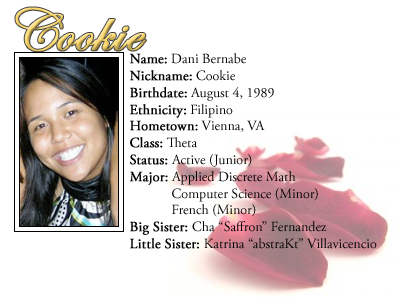
<style>
.page{position:relative;width:400px;height:300px;background:#ffffff}
.page>*{position:absolute;margin:0}
.t1{font:60px "EdwardianScriptITC";font-weight:bold}
.t2{font:14px "AGaramondPro-Regular";color:#000000}
.t3{font:14px "AGaramondPro-Regular";color:#000000;font-weight:bold}
</style>
<div class="page">
<p class="t1" style="left:15px;top:7px;width:131px;height:45px">Cookie</p>
<p class="t2" style="left:129px;top:53px;width:248px;height:196px"><span class="t3">Name:</span> Dani Bernabe<br><span class="t3">Nickname:</span> Cookie<br><span class="t3">Birthdate:</span> August 4, 1989<br><span class="t3">Ethnicity:</span> Filipino<br><span class="t3">Hometown:</span> Vienna, VA<br><span class="t3">Class:</span> Theta<br><span class="t3">Status: </span>Active (Junior)<br><span class="t3">Major:</span> Applied Discrete Math<br>            Computer Science (Minor)<br>            French (Minor)<br><span class="t3">Big Sister: </span>Cha “Saffron” Fernandez<br><span class="t3">Little Sister: </span>Katrina “abstraKt” Villavicencio</p>
</div>
